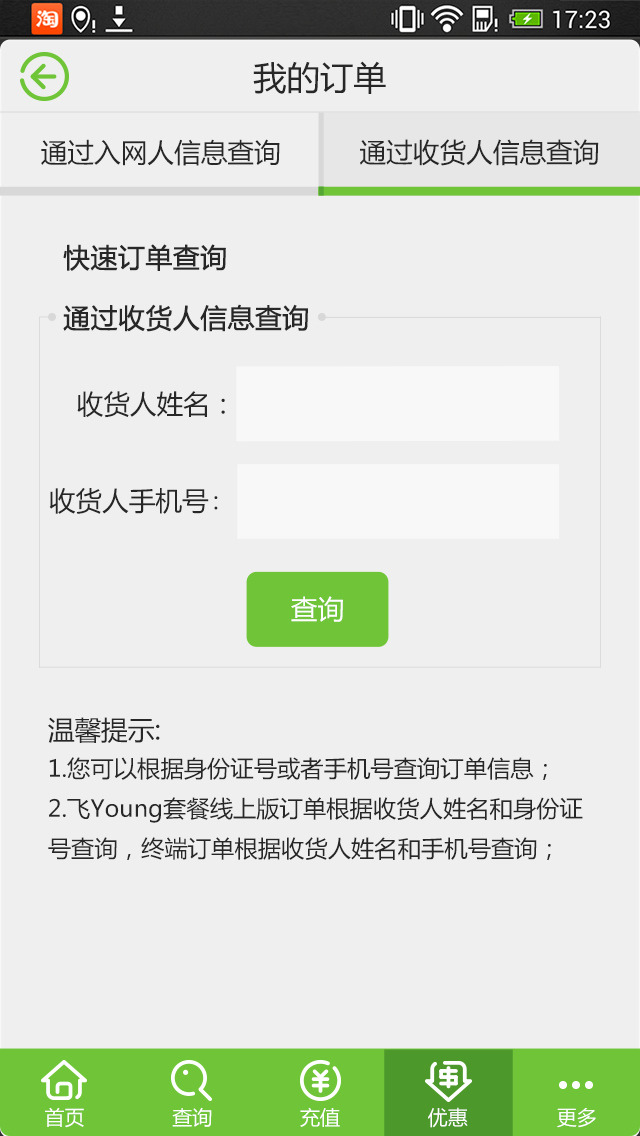
<style>
.page{position:relative;width:640px;height:1136px;background:#efefef}
.page>*{position:absolute;margin:0}
.t1{font:33.3px "MicrosoftYaHei";color:#272727}
.t2{font:26.7px "MicrosoftYaHei";color:#272727}
.t3{font:26.7px "MicrosoftYaHei";color:#272727;font-weight:bold}
.t4{font:23.7px "MicrosoftYaHei";color:#272727}
.t5{font:26.7px "MicrosoftYaHei";color:#ffffff}
.t6{font:23.3px/40px "MicrosoftYaHei";color:#272727}
.t7{font:26.7px/40px "MicrosoftYaHei";color:#272727}
.t8{font:20px "MicrosoftYaHei";color:#ffffff}
</style>
<div class="page">
<p class="t1" style="left:253px;top:61px;width:133px;height:33px">我的订单</p>
<p class="t2" style="left:41px;top:139px;width:239px;height:27px">通过入网人信息查询</p>
<p class="t2" style="left:360px;top:139px;width:239px;height:27px">通过收货人信息查询</p>
<p class="t3" style="left:63px;top:244px;width:163px;height:27px">快速订单查询</p>
<p class="t3" style="left:63px;top:304px;width:245px;height:28px">通过收货人信息查询</p>
<p class="t2" style="left:77px;top:391px;width:148px;height:27px">收货人姓名：</p>
<p class="t2" style="left:49px;top:488px;width:160px;height:26px">收货人手机号</p>
<p class="t4" style="left:214px;top:496px;width:4px;height:14px">：</p>
<p class="t5" style="left:291px;top:596px;width:52px;height:26px">查询</p>
<p class="t6" style="left:48px;top:717px;width:535px;height:143px"><span class="t7">温馨提示:<br></span>1.您可以根据身份证号或者手机号查询订单信息；<br>2.飞Young套餐线上版订单根据收货人姓名和身份证<br>号查询，终端订单根据收货人姓名和手机号查询；</p>
<p class="t8" style="left:45px;top:1107px;width:39px;height:21px">首页</p>
<p class="t8" style="left:172px;top:1107px;width:40px;height:20px">查询</p>
<p class="t8" style="left:300px;top:1107px;width:40px;height:20px">充值</p>
<p class="t8" style="left:428px;top:1107px;width:40px;height:21px">优惠</p>
<p class="t8" style="left:557px;top:1108px;width:39px;height:20px">更多</p>
</div>
